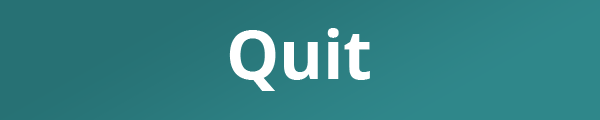
<style>
.page{position:relative;width:600px;height:120px}
.page>*{position:absolute;margin:0}
.t1{font:66.7px "NotoSans-Bold";color:#ffffff}
</style>
<div class="page">
<p class="t1" style="left:229px;top:28px;width:141px;height:63px">Quit</p>
</div>
